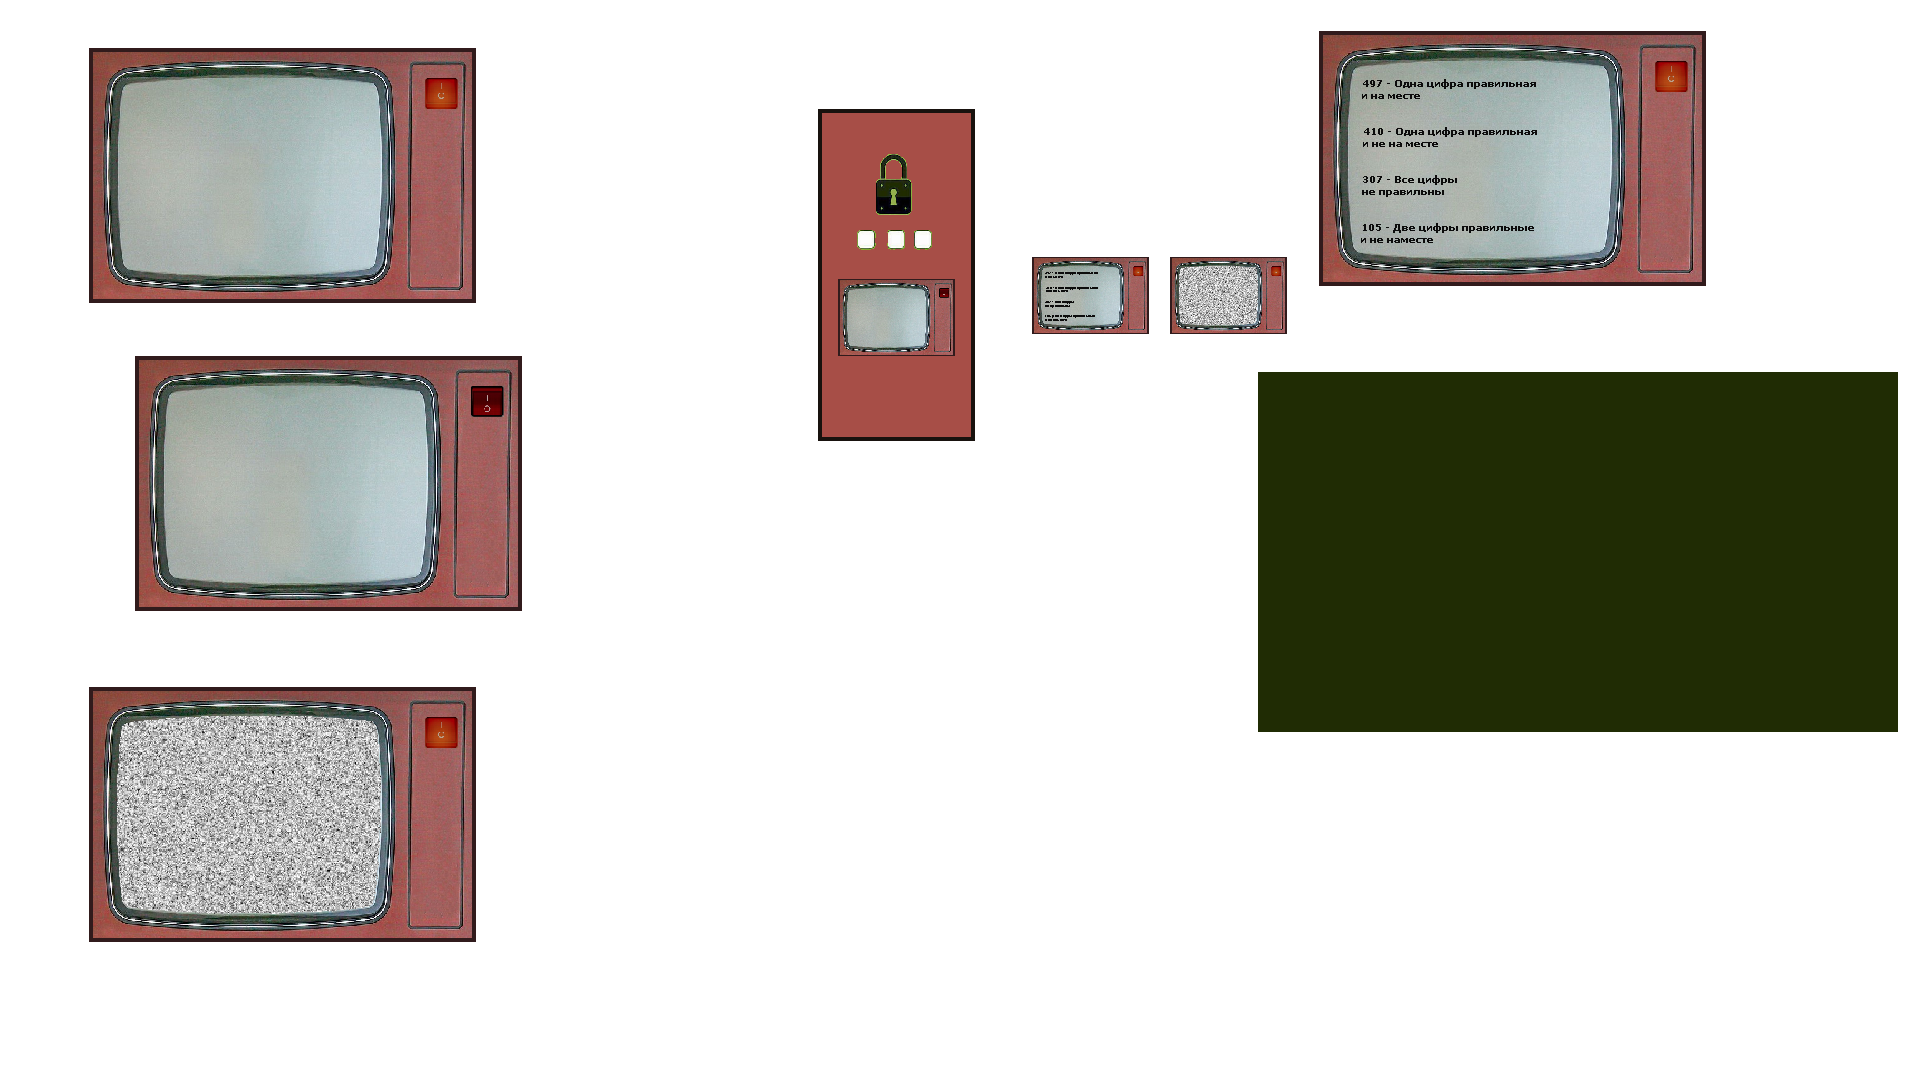
<style>
.page{position:relative;width:1920px;height:1080px;background:#ffffff}
.page>*{position:absolute;margin:0}
.t1{font:10px "Verdana-Bold";color:#0c0c0c}
.t2{font:3px "Verdana-Bold";color:#0c0c0c}
</style>
<div class="page">
<p class="t1" style="left:1362px;top:79px;width:174px;height:20px;text-align:right">497 - Одна цифра правильная <br>и на месте</p>
<p class="t1" style="left:1363px;top:127px;width:174px;height:20px;text-align:right">410 - Одна цифра правильная <br>и не на месте</p>
<p class="t1" style="left:1362px;top:175px;width:95px;height:22px;text-align:right">307 - Все цифры<br>не правильны</p>
<p class="t1" style="left:1361px;top:223px;width:173px;height:20px;text-align:right">105 - Две цифры правильные<br>и не наместе</p>
<p class="t2" style="left:1045px;top:272px;width:53px;height:6px;text-align:right">497 - Одна цифра правильная <br>и на месте</p>
<p class="t2" style="left:1046px;top:287px;width:52px;height:5px;text-align:right">410 - Одна цифра правильная <br>и не на месте</p>
<p class="t2" style="left:1045px;top:301px;width:29px;height:7px;text-align:right">307 - Все цифры<br>не правильны</p>
<p class="t2" style="left:1045px;top:315px;width:50px;height:6px;text-align:right">105 Две цифры правильные<br>и не наместе</p>
</div>
